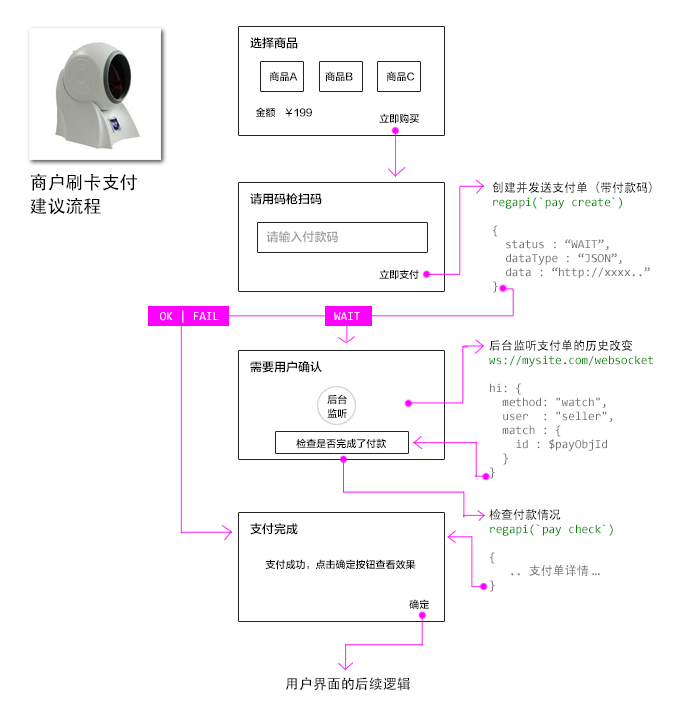
<style>
.page{position:relative;width:680px;height:718px;background:#ffffff}
.page>*{position:absolute;margin:0}
.t1{font:12px "FZLTZHK--GBK1-0";color:#000000}
.t2{font:10px "FZLTZHK--GBK1-0";color:#000000}
.t3{font:18px/24px "AdobeHeitiStd-Regular";color:#000000}
.t4{font:12px/14px "Consolas";color:#707070}
.t5{font:12px/14px "AdobeHeitiStd-Regular";color:#000000}
.t6{font:12px/14px "Consolas";color:#008800}
.t7{font:12px "FZLTZHK--GBK1-0";color:#a0a0a0}
.t8{font:12px "Consolas";color:#ffffff}
.t9{font:10px/14px "FZLTZHK--GBK1-0";color:#000000}
.t10{font:12px/14px "AdobeHeitiStd-Regular";color:#707070}
.t11{font:14px "AdobeHeitiStd-Regular";color:#000000}
</style>
<div class="page">
<p class="t1" style="left:250px;top:37px;width:48px;height:12px">选择商品</p>
<p class="t2" style="left:269px;top:71px;width:146px;height:11px">商品A          商品B            商品C</p>
<p class="t2" style="left:255px;top:107px;width:57px;height:10px">金额   ￥199</p>
<p class="t2" style="left:379px;top:113px;width:40px;height:11px">立即购买</p>
<p class="t3" style="left:30px;top:173px;width:107px;height:42px">商户刷卡支付<br>建议流程</p>
<p class="t4" style="left:492px;top:181px;width:160px;height:112px"><span class="t5">创建并发送支付单（带付款码）<br></span><span class="t6">regapi(`pay create`)<br></span><br>{<br>  status : “WAIT”,<br>  dataType : “JSON”,<br>  data : “http://xxxx..”<br>}</p>
<p class="t1" style="left:250px;top:193px;width:72px;height:12px">请用码枪扫码</p>
<p class="t7" style="left:267px;top:231px;width:71px;height:12px">请输入付款码</p>
<p class="t2" style="left:379px;top:269px;width:40px;height:11px">立即支付</p>
<p class="t8" style="left:160px;top:310px;width:59px;height:13px">OK | FAIL</p>
<p class="t8" style="left:334px;top:312px;width:26px;height:8px">WAIT</p>
<p class="t4" style="left:489px;top:339px;width:164px;height:140px"><span class="t5">后台监听支付单的历史改变<br></span><span class="t6">ws://mysite.com/websocket<br><br></span>hi: {<br>  method: "watch",<br>  user  : "seller",<br>  match : {<br>    id : $payObjId<br>  }<br>}</p>
<p class="t1" style="left:250px;top:361px;width:72px;height:12px">需要用户确认</p>
<p class="t9" style="left:327px;top:394px;width:20px;height:25px;text-align:center">后台<br>监听</p>
<p class="t2" style="left:296px;top:438px;width:90px;height:11px">检查是否完成了付款</p>
<p class="t6" style="left:489px;top:508px;width:124px;height:84px"><span class="t5">检查付款情况<br></span>regapi(`pay check`)<br><br><span class="t4">{<br>   .. </span><span class="t10">支付单详情 ...<br></span><span class="t4">}</span></p>
<p class="t1" style="left:250px;top:523px;width:48px;height:12px">支付完成</p>
<p class="t2" style="left:265px;top:559px;width:151px;height:11px">支付成功，点击确定按钮查看效果</p>
<p class="t2" style="left:409px;top:599px;width:20px;height:10px">确定</p>
<p class="t11" style="left:286px;top:677px;width:125px;height:14px">用户界面的后续逻辑</p>
</div>
